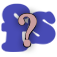
<style>
.page{position:relative;width:57px;height:57px;background:#ffffff}
.page>*{position:absolute;margin:0}
.t1{font:64.8px "CooperBlackStd";letter-spacing:0.05em;color:#484bb5;font-weight:bold;scale:0.94 1}
.t2{font:44.5px "IskoolaPota";letter-spacing:0.05em;color:#ca9e9e;font-weight:bold}
.t3{font:58.8px "CooperBlackStd";letter-spacing:0.05em;color:#484bb5;font-weight:bold}
</style>
<div class="page">
<p class="t1" style="left:2px;top:5px;width:29px;height:47px">f</p>
<p class="t2" style="left:19px;top:14px;width:17px;height:33px">?</p>
<p class="t2" style="left:19px;top:14px;width:17px;height:33px;opacity:0.64">?</p>
<p class="t3" style="left:27px;top:12px;width:29px;height:32px">s</p>
</div>
